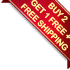
<style>
.page{position:relative;width:70px;height:70px;background:#ffffff}
.page>*{position:absolute;margin:0}
.t1{font:8.3px "ArialRoundedMTBold";letter-spacing:-0.025em;color:#fdf598}
</style>
<div class="page">
<p class="t1" style="left:20px;top:0px;width:51px;height:51px;text-align:center;rotate:45deg">BUY 2 <br>GET 1 FREE + <br>FREE SHIPPING</p>
</div>
